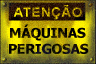
<style>
.page{position:relative;width:96px;height:64px}
.page>*{position:absolute;margin:0}
.t1{font:13px "Arial-BoldMT";letter-spacing:0.03em;scale:1.05 1}
.t2{font:13.3px "Tahoma-Bold";letter-spacing:-0.02em;color:#000000;scale:1.05 1}
</style>
<div class="page">
<p class="t1" style="left:13px;top:5px;width:69px;height:15px">ATENÇÃO</p>
<p class="t2" style="left:10px;top:24px;width:76px;height:17px">MÁQUINAS</p>
<p class="t2" style="left:9px;top:43px;width:80px;height:11px">PERIGOSAS</p>
</div>
